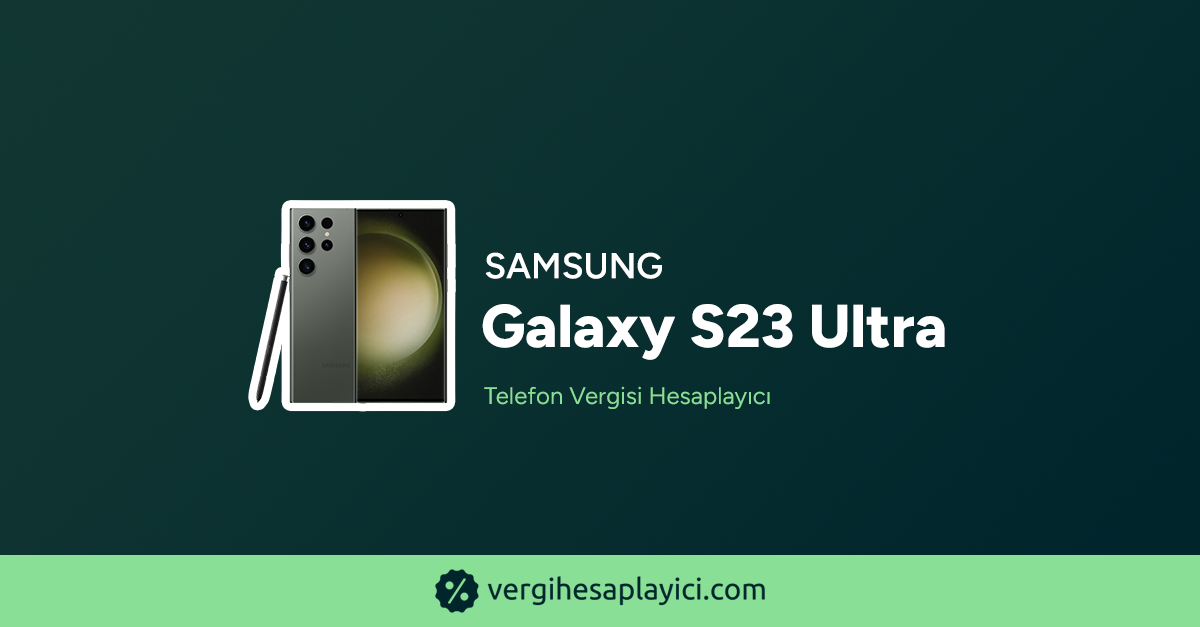
<style>
.page{position:relative;width:1200px;height:627px}
.page>*{position:absolute;margin:0}
.t1{font:36px "Figtree-SemiBold";color:#ffffff;text-transform:uppercase;font-weight:bold}
.t2{font:60.3px "Figtree-ExtraBold";color:#ffffff;font-weight:bold}
.t3{font:24px "Figtree-Regular";color:#88df95;font-weight:bold}
</style>
<div class="page">
<p class="t1" style="left:485px;top:252px;width:177px;height:27px">Samsung</p>
<p class="t2" style="left:482px;top:304px;width:463px;height:56px">Galaxy S23 Ultra</p>
<p class="t3" style="left:484px;top:386px;width:286px;height:23px">Telefon Vergisi Hesaplayıcı</p>
</div>
